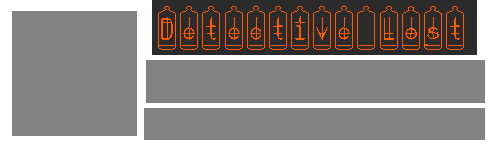
<style>
.page{position:relative;width:500px;height:150px;background:#828282}
.page>*{position:absolute;margin:0}
.t1{font:29.3px "BONX-TubeBold";color:#ff5a00}
</style>
<div class="page">
<p class="t1" style="left:158px;top:6px;width:306px;height:44px">Detective Lost</p>
</div>
